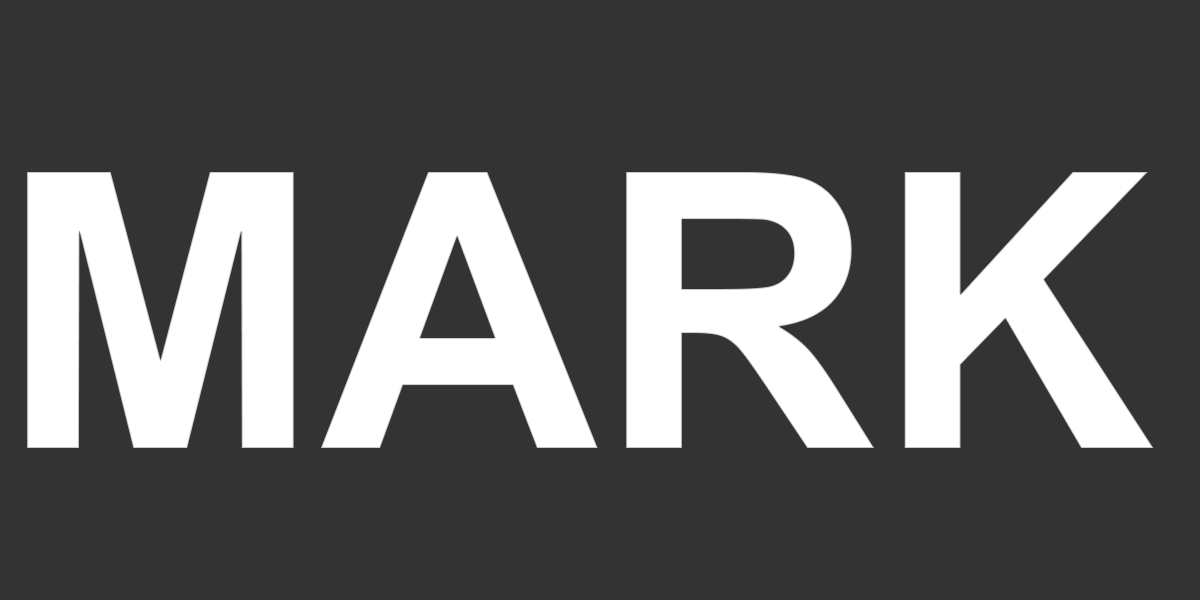
<style>
.page{position:relative;width:1200px;height:600px;background:#333333}
.page>*{position:absolute;margin:0}
.t1{font:384.5px "Arial-BoldMT";color:#ffffff}
</style>
<div class="page">
<p class="t1" style="left:27px;top:172px;width:1127px;height:276px">MARK</p>
</div>
